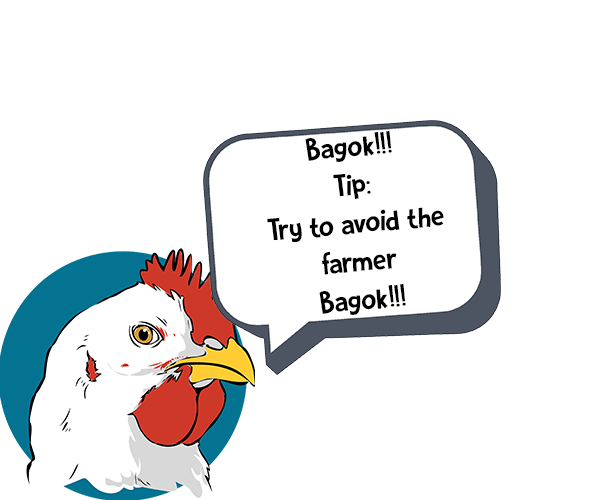
<style>
.page{position:relative;width:599px;height:500px;background:#ffffff}
.page>*{position:absolute;margin:0}
.t1{font:32px "OriginalQualityDEMO-Regular";color:#000000}
</style>
<div class="page">
<p class="t1" style="left:267px;top:130px;width:177px;height:185px;text-align:center;rotate:-5deg">Bagok!!!<br>Tip:<br>Try to avoid the farmer<br>Bagok!!!</p>
</div>
